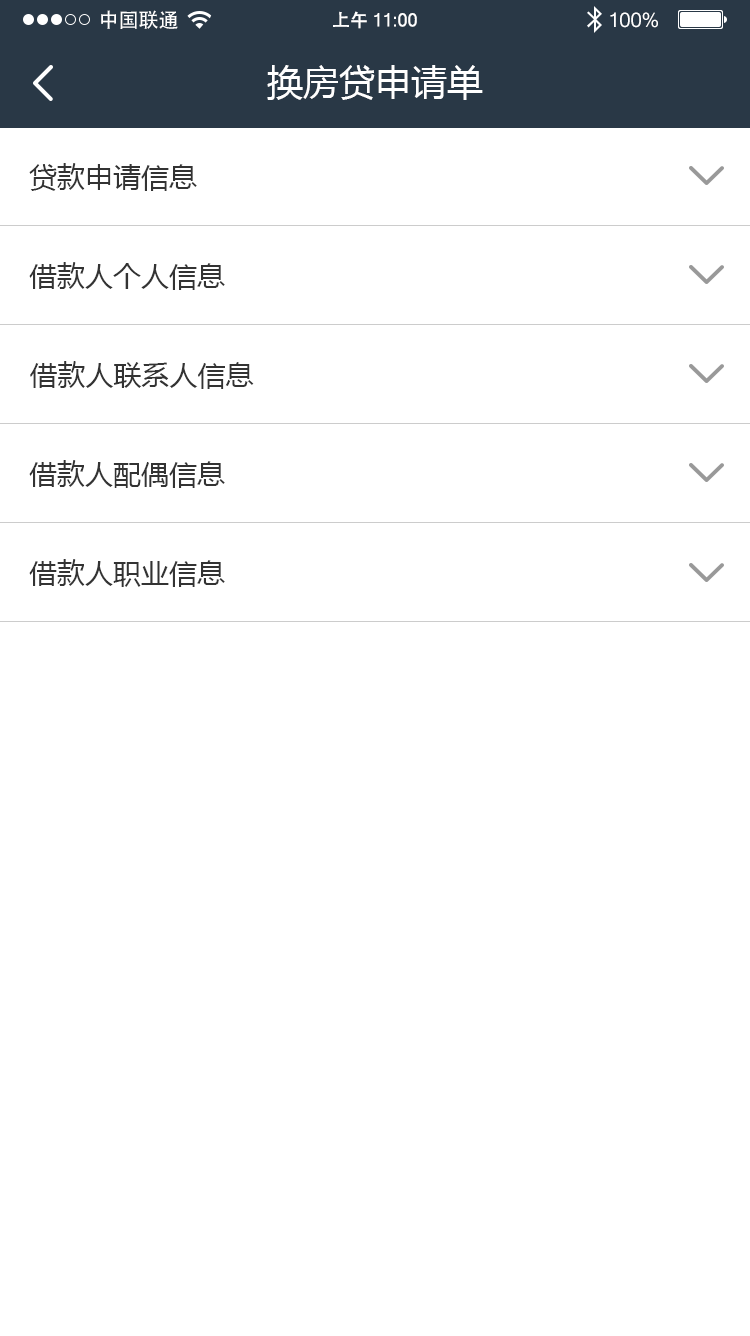
<style>
.page{position:relative;width:750px;height:1336px;background:#ffffff}
.page>*{position:absolute;margin:0}
.t1{font:20px "STHeiti";color:#ffffff}
.t2{font:18px "MicrosoftSansSerif";color:#ffffff}
.t3{font:18px "STHeiti";color:#ffffff}
.t4{font:20px "MicrosoftSansSerif";color:#ffffff}
.t5{font:36px "MicrosoftYaHei";color:#ffffff}
.t6{font:28px "MicrosoftYaHei";color:#333333}
</style>
<div class="page">
<p class="t1" style="left:101px;top:10px;width:77px;height:19px">中国联通</p>
<p class="t2" style="left:333px;top:11px;width:84px;height:18px"><span class="t3">上午 </span>11:00</p>
<p class="t4" style="left:610px;top:12px;width:48px;height:16px">100%</p>
<p class="t5" style="left:267px;top:65px;width:216px;height:35px">换房贷申请单</p>
<p class="t6" style="left:29px;top:163px;width:168px;height:28px">贷款申请信息</p>
<p class="t6" style="left:29px;top:262px;width:196px;height:28px">借款人个人信息</p>
<p class="t6" style="left:30px;top:361px;width:224px;height:28px">借款人联系人信息</p>
<p class="t6" style="left:29px;top:460px;width:196px;height:28px">借款人配偶信息</p>
<p class="t6" style="left:29px;top:559px;width:196px;height:28px">借款人职业信息</p>
</div>
